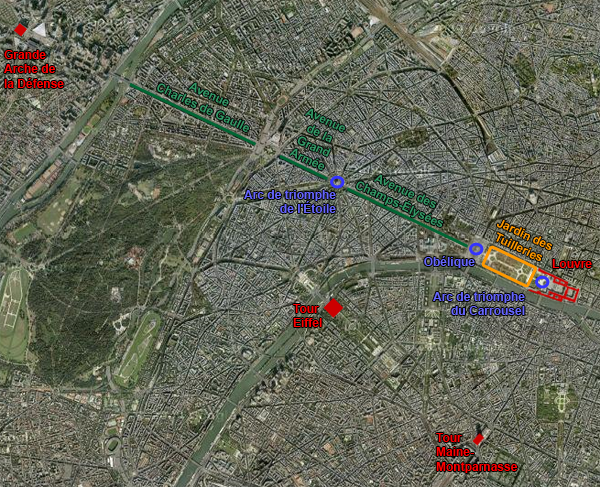
<style>
.page{position:relative;width:600px;height:487px}
.page>*{position:absolute;margin:0}
.t1{font:12px "Arial-BoldMT";color:#ff0000}
.t2{font:12px "Arial-BoldMT";color:#339966}
.t3{font:12px "Arial-BoldMT";color:#6666ff}
.t4{font:12px "Arial-BoldMT";color:#ff9900}
</style>
<div class="page">
<p class="t1" style="left:4px;top:50px;width:60px;height:38px">Grande<br>Arche de<br>la Défense</p>
<p class="t2" style="left:289px;top:108px;width:56px;height:62px;text-align:center;rotate:25deg">Avenue<br>de la<br>Grand<br>Armée</p>
<p class="t2" style="left:356px;top:174px;width:87px;height:53px;text-align:center;rotate:25deg">Avenue des<br>Champs-Élysées</p>
<p class="t3" style="left:244px;top:190px;width:92px;height:23px;text-align:right">Arc de triomphe<br>de l'Étoile</p>
<p class="t4" style="left:496px;top:219px;width:56px;height:42px;text-align:center;rotate:25deg">Jardin des<br>Tuilleries</p>
<p class="t3" style="left:424px;top:256px;width:51px;height:12px">Obélique</p>
<p class="t1" style="left:552px;top:259px;width:40px;height:9px">Louvre</p>
<p class="t3" style="left:433px;top:292px;width:92px;height:23px;text-align:right">Arc de triomphe<br>du Carrousel</p>
<p class="t1" style="left:293px;top:304px;width:29px;height:23px">Tour<br>Eiffel</p>
<p class="t1" style="left:436px;top:433px;width:82px;height:40px">Tour<br>Maine-<br>Montparnasse</p>
</div>
